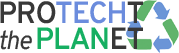
<style>
.page{position:relative;width:179px;height:53px;background:#ffffff}
.page>*{position:absolute;margin:0}
.t1{font:30.7px "OverpassRoman-SemiBold";letter-spacing:-0.03em;color:#6b8cdd;scale:0.97 1}
.t2{font:30.7px "OverpassRoman-SemiBold";letter-spacing:-0.03em;color:#383838;scale:0.97 1}
.t3{font:26px "Overpass-Italic";letter-spacing:-0.03em;color:#383838;scale:0.97 1}
.t4{font:30.7px "OverpassRoman-SemiBold";letter-spacing:-0.03em;color:#16af62;scale:0.97 1}
</style>
<div class="page">
<p class="t1" style="left:0px;top:1px;width:143px;height:23px"><span class="t2">PRO</span>TECH<span class="t2">T</span></p>
<p class="t3" style="left:0px;top:30px;width:32px;height:20px">the</p>
<p class="t4" style="left:37px;top:27px;width:106px;height:22px">PLAN<span class="t2">ET</span></p>
</div>
